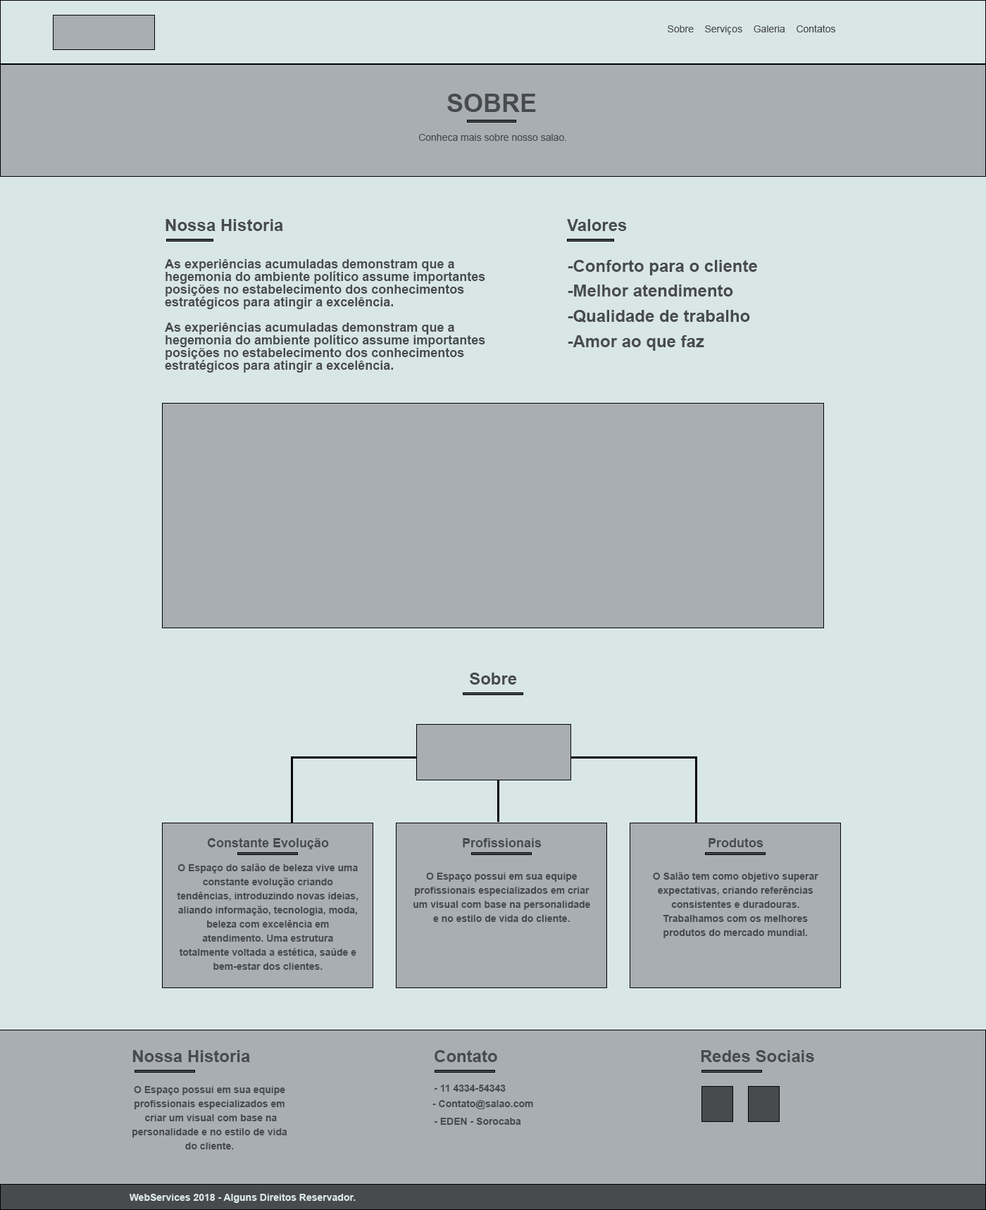
<style>
.page{position:relative;width:986px;height:1210px;background:#d9e6e6}
.page>*{position:absolute;margin:0}
.t1{font:9.9px "ArialMT";color:#484b4d}
.t2{font:25.3px "Arial-BoldMT";color:#484b4d;text-transform:uppercase}
.t3{font:16.8px "Arial-BoldMT";color:#484b4d}
.t4{font:16.7px "Arial-BoldMT";color:#484b4d}
.t5{font:12.7px/12.7px "Arial-BoldMT";color:#484b4d}
.t6{font:16.9px/25.3px "Arial-BoldMT";color:#484b4d}
.t7{font:12.7px "Arial-BoldMT";color:#484b4d}
.t8{font:9.9px/14.1px "Arial-BoldMT";color:#484b4d}
.t9{font:9.8px/14px "Arial-BoldMT";color:#484b4d}
.t10{font:9.9px "Arial-BoldMT";color:#484b4d}
.t11{font:9.9px "Arial-BoldMT";color:#d9e6e6}
</style>
<div class="page">
<p class="t1" style="left:667px;top:25px;width:169px;height:10px">Sobre    Serviços    Galeria    Contatos</p>
<p class="t2" style="left:447px;top:94px;width:89px;height:18px">sOBRE</p>
<p class="t1" style="left:418px;top:134px;width:148px;height:7px">Conheca mais sobre nosso salao.</p>
<p class="t3" style="left:165px;top:219px;width:118px;height:12px">Nossa Historia</p>
<p class="t4" style="left:567px;top:219px;width:60px;height:12px">Valores</p>
<p class="t5" style="left:165px;top:259px;width:320px;height:113px;text-align:center">As experiências acumuladas demonstram que a  hegemonia do ambiente político assume importantes  posições no estabelecimento dos conhecimentos  estratégicos para atingir a excelência. <br>  <br>As experiências acumuladas demonstram que a   hegemonia do ambiente político assume importantes posições no estabelecimento dos conhecimentos  estratégicos para atingir a excelência.</p>
<p class="t6" style="left:568px;top:260px;width:189px;height:91px;text-align:center">-Conforto para o cliente <br>-Melhor atendimento  <br>-Qualidade de trabalho <br>-Amor ao que faz</p>
<p class="t3" style="left:470px;top:672px;width:47px;height:12px">Sobre</p>
<p class="t7" style="left:207px;top:838px;width:122px;height:11px">Constante Evolução</p>
<p class="t7" style="left:463px;top:838px;width:78px;height:9px">Profissionais</p>
<p class="t7" style="left:708px;top:838px;width:55px;height:9px">Produtos</p>
<p class="t8" style="left:177px;top:863px;width:181px;height:107px;text-align:center">O Espaço do salão de beleza vive uma constante evolução criando tendências, introduzindo novas ideias, aliando informação, tecnologia, moda, beleza com excelência em atendimento. Uma estrutura totalmente voltada a estética, saúde e bem-estar dos clientes.</p>
<p class="t8" style="left:413px;top:872px;width:177px;height:50px;text-align:center">O Espaço possui em sua equipe profissionais especializados em criar um visual com base na personalidade e no estilo de vida do cliente.</p>
<p class="t8" style="left:653px;top:872px;width:165px;height:66px;text-align:center">O Salão tem como objetivo superar expectativas, criando referências consistentes e duradouras. Trabalhamos com os melhores produtos do mercado mundial.</p>
<p class="t3" style="left:132px;top:1050px;width:118px;height:12px">Nossa Historia</p>
<p class="t3" style="left:434px;top:1050px;width:63px;height:12px">Contato</p>
<p class="t3" style="left:701px;top:1050px;width:113px;height:12px">Redes Sociais</p>
<p class="t9" style="left:132px;top:1086px;width:155px;height:63px;text-align:center">O Espaço possui em sua equipe profissionais especializados em<br> criar um visual com base na personalidade e no estilo de vida <br>do cliente.</p>
<p class="t10" style="left:434px;top:1084px;width:72px;height:7px">- 11 4334-54343</p>
<p class="t10" style="left:432px;top:1100px;width:101px;height:9px">- Contato@salao.com</p>
<p class="t10" style="left:434px;top:1117px;width:87px;height:7px">- EDEN - Sorocaba</p>
<p class="t11" style="left:129px;top:1193px;width:227px;height:10px">WebServices 2018 - Alguns Direitos Reservador.</p>
</div>
